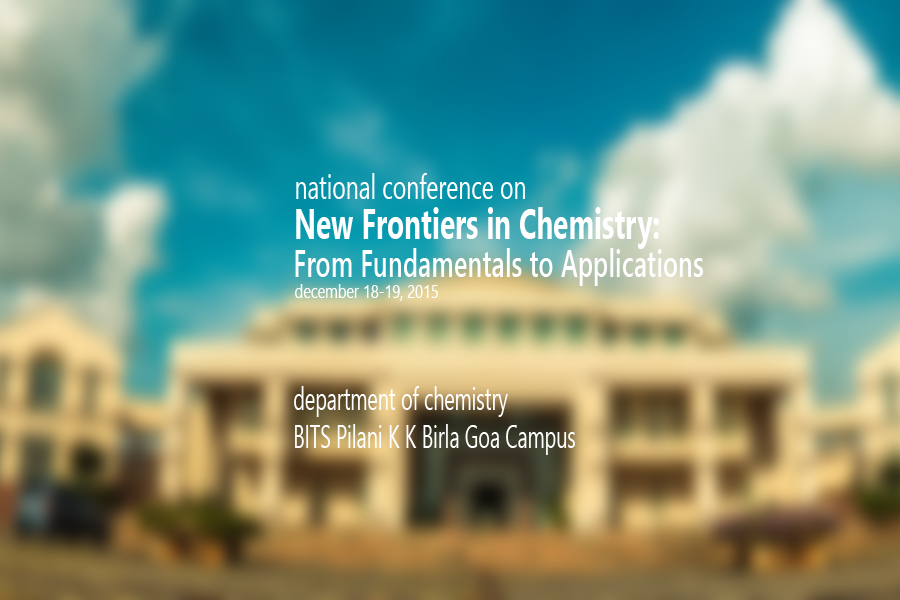
<style>
.page{position:relative;width:900px;height:600px}
.page>*{position:absolute;margin:0}
.t1{font:34px "SegoeUI";color:#ffffff;scale:0.67 1}
.t2{font:41.6px "SegoeUI-Bold";color:#ffffff;scale:0.67 1}
.t3{font:37.8px "SegoeUI-Semibold";color:#ffffff;scale:0.67 1}
.t4{font:19.2px "SegoeUI";color:#ffffff;scale:0.76 1}
.t5{font:32.3px "SegoeUI";color:#ffffff;scale:0.61 1}
</style>
<div class="page">
<p class="t1" style="left:296px;top:173px;width:229px;height:26px">national conference on</p>
<p class="t2" style="left:296px;top:207px;width:363px;height:42px">New Frontiers in Chemistry:</p>
<p class="t3" style="left:295px;top:248px;width:408px;height:38px">From Fundamentals to Applications</p>
<p class="t4" style="left:295px;top:284px;width:143px;height:17px">december 18-19, 2015</p>
<p class="t5" style="left:294px;top:386px;width:281px;height:69px">department of chemistry<br>BITS Pilani K K Birla Goa Campus</p>
</div>
